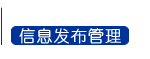
<style>
.page{position:relative;width:150px;height:59px;background:#ffffff}
.page>*{position:absolute;margin:0}
.t1{font:16px "YouYuan";letter-spacing:0.05em;color:#ffffff;font-weight:bold}
</style>
<div class="page">
<p class="t1" style="left:19px;top:28px;width:102px;height:16px">信息发布管理</p>
</div>
